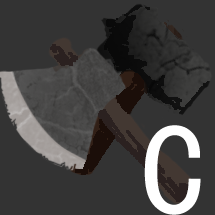
<style>
.page{position:relative;width:215px;height:215px;background:#333333}
.page>*{position:absolute;margin:0}
.t1{font:130.4px "KaiTi";letter-spacing:-0.06em;color:#ffffff}
</style>
<div class="page">
<p class="t1" style="left:144px;top:125px;width:57px;height:90px">C</p>
</div>
